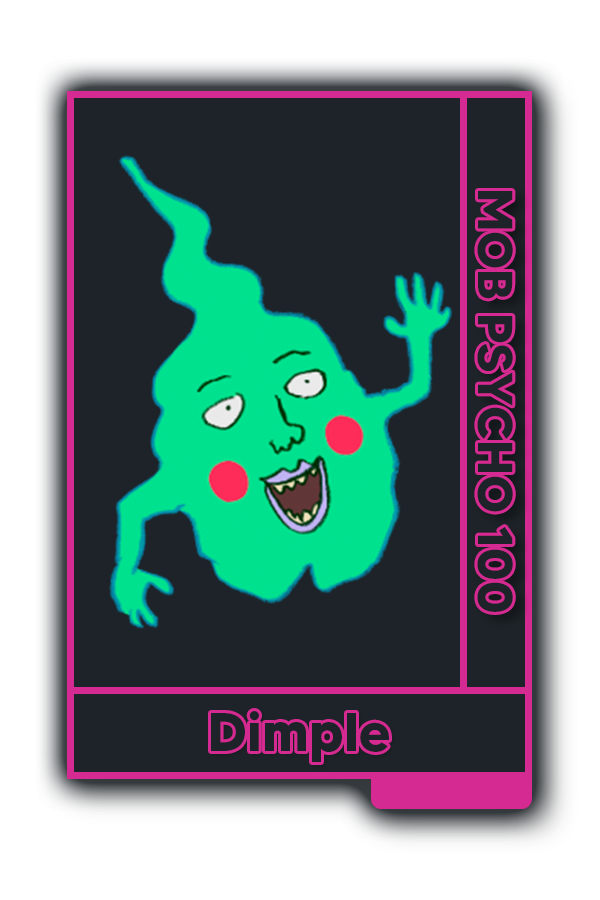
<style>
.page{position:relative;width:600px;height:900px;background:#1d2328}
.page>*{position:absolute;margin:0}
.t1{font:48.8px "MADETOMMY-Bold";color:#1d2328}
.t2{font:54.6px "MADETOMMY-Bold";color:#1d2328}
</style>
<div class="page">
<p class="t1" style="left:477px;top:191px;width:36px;height:421px;rotate:90deg">MOB PSYCHO 100</p>
<p class="t2" style="left:211px;top:711px;width:178px;height:51px">Dimple</p>
</div>
